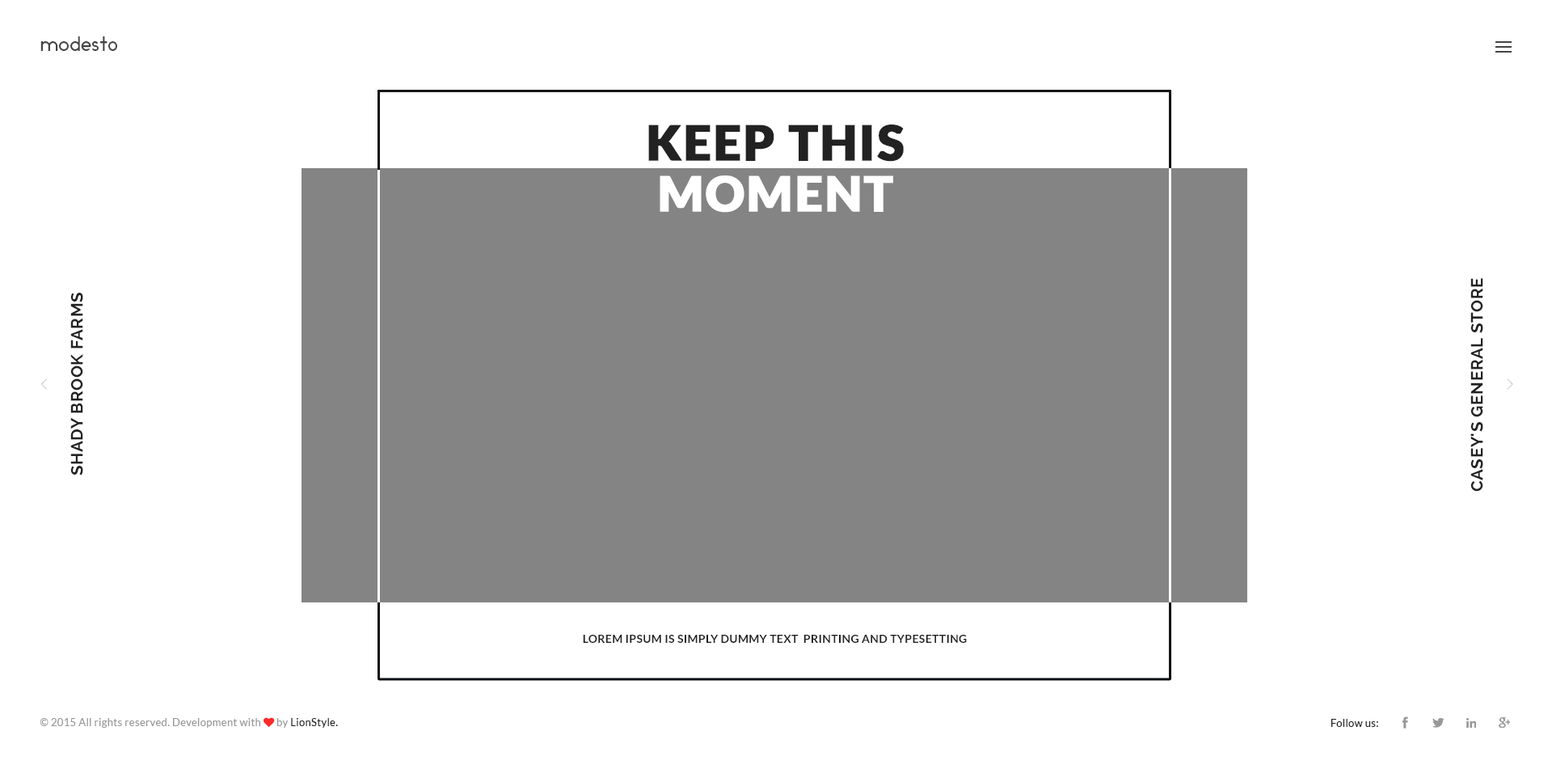
<style>
.page{position:relative;width:1552px;height:769px;background:#ffffff}
.page>*{position:absolute;margin:0}
.t1{font:19.4px "Ikaros";letter-spacing:0.025em;color:#444444}
.t2{font:48.5px "Lato-Black";letter-spacing:0.025em;color:#222222;text-transform:uppercase;font-weight:bold}
.t3{font:48.5px "Lato-Black";letter-spacing:0.025em;color:#ffffff;text-transform:uppercase;font-weight:bold}
.t4{font:16.2px "Raleway-Bold";letter-spacing:0.025em;color:#222222;text-transform:uppercase;scale:1.03 1}
.t5{font:35.6px "DecorCyrillic";scale:0.6 1}
.t6{font:35.6px "DecorCyrillic";letter-spacing:-0.05em;scale:0.59 1}
.t7{font:11.3px "Lato-Bold";letter-spacing:0.025em;color:#222222;text-transform:uppercase}
.t8{font:10.5px "Lato-Regular";letter-spacing:0.025em;color:#989898}
.t9{font:10.5px "FontAwesome";letter-spacing:0.025em;color:#fe2b2b}
.t10{font:10.5px "Lato-Regular";letter-spacing:0.025em;color:#222222}
</style>
<div class="page">
<p class="t1" style="left:40px;top:36px;width:77px;height:15px">modesto</p>
<p class="t2" style="left:648px;top:124px;width:255px;height:38px">keep this</p>
<p class="t3" style="left:659px;top:175px;width:234px;height:38px">moment</p>
<p class="t4" style="left:1470px;top:278px;width:13px;height:213px;rotate:-90deg">Casey's General Store</p>
<p class="t4" style="left:70px;top:293px;width:13px;height:182px;rotate:-90deg">Shady Brook Farms</p>
<p class="t5" style="left:41px;top:378px;width:6px;height:12px">&lt;</p>
<p class="t6" style="left:1506px;top:378px;width:7px;height:12px">&gt;</p>
<p class="t7" style="left:583px;top:634px;width:384px;height:8px">Lorem Ipsum is simply dummy text  printing and typesetting</p>
<p class="t8" style="left:40px;top:717px;width:298px;height:10px">© 2015 All rights reserved. Development with <span class="t9">♥ </span>by <span class="t10">LionStyle.</span></p>
<p class="t10" style="left:1331px;top:718px;width:47px;height:9px">Follow us:</p>
</div>
